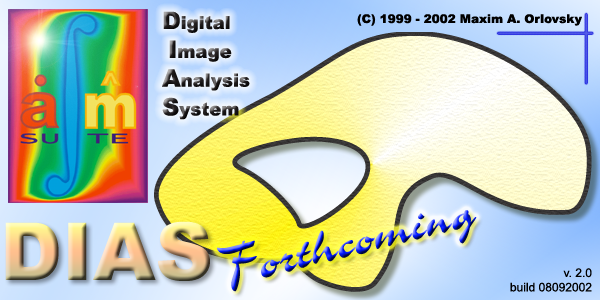
<style>
.page{position:relative;width:600px;height:300px}
.page>*{position:absolute;margin:0}
.t1{font:18px "Arial-Black";color:#231f20}
.t2{font:24px "Arial-Black";color:#231f20}
.t3{font:12px "Arial-Black";color:#000000}
.t4{font:80px "Arial-Black"}
.t5{font:49px "CorridaCyrillic"}
.t6{font:12px "ArialMT";color:#000000}
</style>
<div class="page">
<p class="t1" style="left:162px;top:11px;width:88px;height:109px"><span class="t2">D</span>igital<br> <span class="t2">I</span>mage<br><span class="t2">A</span>nalysis<br><span class="t2">S</span>ystem</p>
<p class="t3" style="left:357px;top:14px;width:225px;height:12px">(C) 1999 - 2002 Maxim A. Orlovsky</p>
<p class="t4" style="left:5px;top:221px;width:205px;height:60px">DIAS</p>
<p class="t5" style="left:217px;top:210px;width:260px;height:82px;rotate:-14deg">Forthcoming</p>
<p class="t6" style="left:510px;top:268px;width:82px;height:24px;text-align:right">v. 2.0<br>build 08092002</p>
</div>
